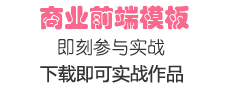
<style>
.page{position:relative;width:225px;height:93px;background:#ffffff}
.page>*{position:absolute;margin:0}
.t1{font:25px "STHupo";color:#f9688d}
.t2{font:18px "YouYuan";color:#343434}
.t3{font:18px "MicrosoftYaHei";color:#343434}
</style>
<div class="page">
<p class="t1" style="left:40px;top:5px;width:149px;height:25px">商业前端模板</p>
<p class="t2" style="left:58px;top:38px;width:107px;height:18px">即刻参与实战</p>
<p class="t3" style="left:40px;top:64px;width:143px;height:19px">下载即可实战作品</p>
</div>
